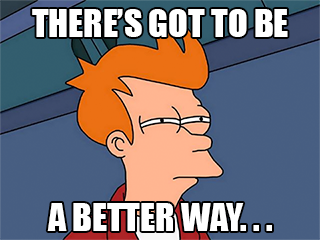
<style>
.page{position:relative;width:320px;height:240px}
.page>*{position:absolute;margin:0}
.t1{font:36px "Impact";color:#ffffff}
</style>
<div class="page">
<p class="t1" style="left:32px;top:9px;width:256px;height:28px">THERE’S GOT TO BE</p>
<p class="t1" style="left:47px;top:203px;width:225px;height:28px">A BETTER WAY. . .</p>
</div>
